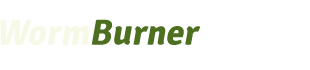
<style>
.page{position:relative;width:310px;height:70px;background:#ffffff}
.page>*{position:absolute;margin:0}
.t1{font:36px "Signika-Bold";color:#4d6f20;font-style:italic}
.t2{font:36px "Signika-Bold";color:#f6f9e5;font-style:italic}
</style>
<div class="page">
<p class="t1" style="left:0px;top:19px;width:201px;height:26px"><span class="t2">Worm</span>Burner</p>
</div>
